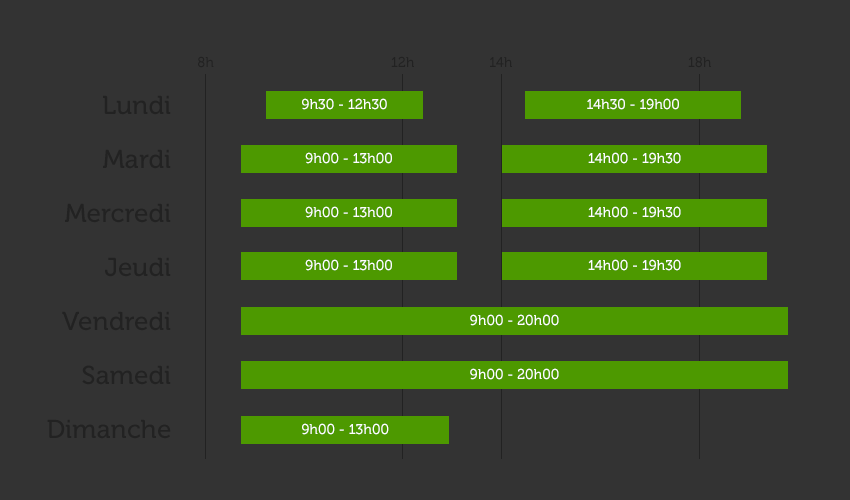
<style>
.page{position:relative;width:850px;height:500px;background:#333333}
.page>*{position:absolute;margin:0}
.t1{font:14px "Museo-500";color:#222222}
.t2{font:26px/54px "Museo-500";color:#222222}
.t3{font:14px "Museo-500";color:#ffffff}
</style>
<div class="page">
<p class="t1" style="left:198px;top:56px;width:16px;height:12px">8h</p>
<p class="t1" style="left:391px;top:56px;width:23px;height:11px">12h</p>
<p class="t1" style="left:490px;top:57px;width:22px;height:10px">14h</p>
<p class="t1" style="left:688px;top:56px;width:23px;height:12px">18h</p>
<p class="t2" style="left:47px;top:95px;width:124px;height:344px;text-align:right">Lundi<br>Mardi<br>Mercredi<br>Jeudi<br>Vendredi<br>Samedi<br>Dimanche</p>
<p class="t3" style="left:302px;top:98px;width:85px;height:12px">9h30 - 12h30</p>
<p class="t3" style="left:587px;top:98px;width:92px;height:12px">14h30 - 19h00</p>
<p class="t3" style="left:305px;top:152px;width:87px;height:12px">9h00 - 13h00</p>
<p class="t3" style="left:588px;top:152px;width:93px;height:12px">14h00 - 19h30</p>
<p class="t3" style="left:305px;top:206px;width:87px;height:12px">9h00 - 13h00</p>
<p class="t3" style="left:588px;top:206px;width:93px;height:12px">14h00 - 19h30</p>
<p class="t3" style="left:305px;top:259px;width:87px;height:12px">9h00 - 13h00</p>
<p class="t3" style="left:588px;top:259px;width:93px;height:12px">14h00 - 19h30</p>
<p class="t3" style="left:470px;top:314px;width:89px;height:12px">9h00 - 20h00</p>
<p class="t3" style="left:470px;top:368px;width:89px;height:12px">9h00 - 20h00</p>
<p class="t3" style="left:302px;top:423px;width:87px;height:12px">9h00 - 13h00</p>
</div>
